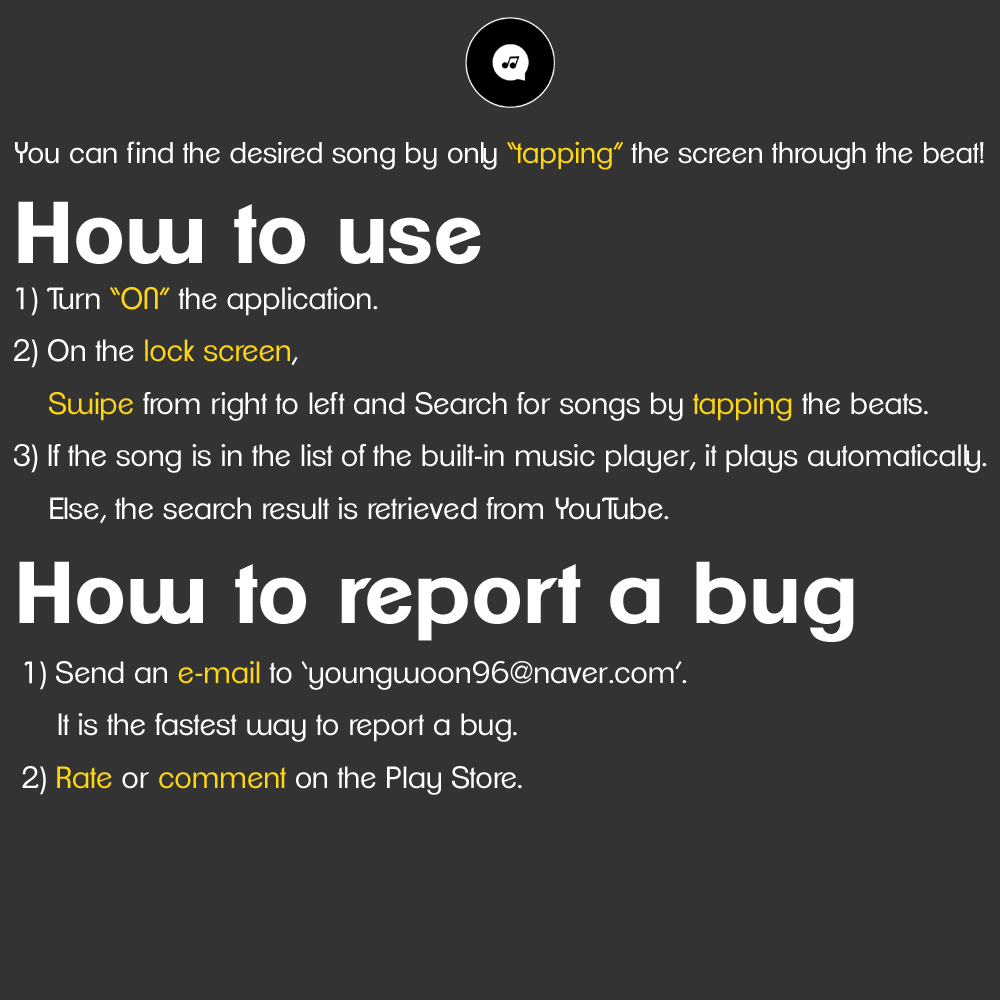
<style>
.page{position:relative;width:1000px;height:1000px;background:#333333}
.page>*{position:absolute;margin:0}
.t1{font:29px "ClementePDag-Book";color:#ffffff}
.t2{font:29px "ClementePDag-Book";color:#ffd612}
.t3{font:85px "ClementePDam-Bold";color:#ffffff}
.t4{font:30px "ClementePDag-Book";color:#ffffff}
.t5{font:30px "ClementePDag-Book";color:#ffd612}
</style>
<div class="page">
<p class="t1" style="left:15px;top:141px;width:969px;height:29px">You can find the desired song by only <span class="t2">“tapping”</span> the screen through the beat!</p>
<p class="t3" style="left:18px;top:201px;width:463px;height:63px">How to use</p>
<p class="t4" style="left:14px;top:287px;width:973px;height:237px">1) Turn <span class="t5">“ON”</span> the application.<br>2) On the <span class="t5">lock screen</span>,<br>    <span class="t5">Swipe</span> from right to left and Search for songs by <span class="t5">tapping</span> the beats.<br>3) If the song is in the list of the built-in music player, it plays automatically.<br>    Else, the search result is retrieved from YouTube.</p>
<p class="t3" style="left:19px;top:561px;width:835px;height:81px">How to report a bug</p>
<p class="t4" style="left:22px;top:661px;width:665px;height:134px">1) Send an <span class="t5">e-mail</span> to ‘youngwoon96@naver.com’. <br>    It is the fastest way to report a bug. <br>2) <span class="t5">Rate</span> or <span class="t5">comment</span> on the Play Store.</p>
</div>
